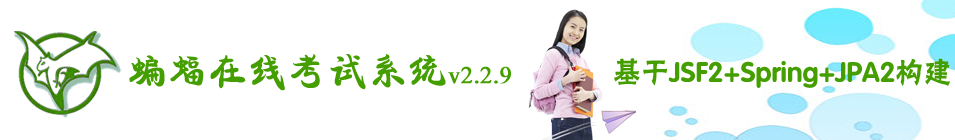
<style>
.page{position:relative;width:955px;height:140px;background:#ffffff}
.page>*{position:absolute;margin:0}
.t1{font:40px "FZKANGK--GBK1-0";color:#459e00}
.t2{font:28px "FZYHK--GBK1-0";color:#459e00}
.t3{font:24px "TimesNewRomanPSMT";color:#459e00;font-weight:bold}
</style>
<div class="page">
<p class="t1" style="left:129px;top:54px;width:317px;height:37px">蝙蝠在线考试系统</p>
<p class="t2" style="left:614px;top:58px;width:336px;height:30px">基于JSF2+Spring+JPA2构建</p>
<p class="t3" style="left:448px;top:66px;width:63px;height:18px">v2.2.9</p>
</div>
